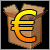
<style>
.page{position:relative;width:50px;height:50px;background:#000000}
.page>*{position:absolute;margin:0}
.t1{font:44.5px "ArialMT"}
</style>
<div class="page">
<p class="t1" style="left:11px;top:10px;width:26px;height:32px">€</p>
</div>
